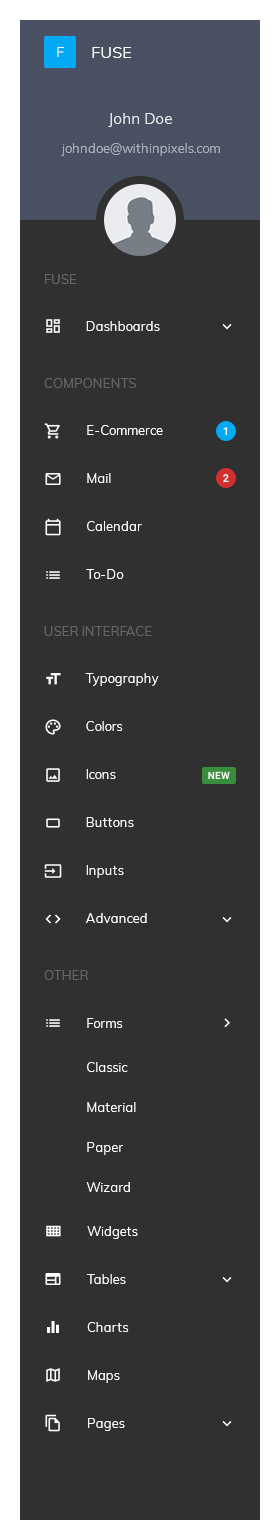
<style>
.page{position:relative;width:280px;height:1540px;background:#303030}
.page>*{position:absolute;margin:0}
.t1{font:14px "Muli-Regular";color:#ffffff}
.t2{font:16px "Muli-Regular";color:#ffffff}
.t3{font:15px "Muli-Regular";color:#ffffff}
.t4{font:13px "Muli-Regular";color:#abafb7}
.t5{font:13px "Muli-Regular";color:#666666;text-transform:uppercase}
.t6{font:13px "Muli-Regular";color:#ffffff}
.t7{font:13px/48px "Muli-Regular";color:#ffffff}
.t8{font:11px "Roboto-Bold";color:#ffffff}
.t9{font:10px "Roboto-Bold";color:#ffffff}
.t10{font:13px/40px "Muli-Regular";color:#ffffff}
</style>
<div class="page">
<p class="t1" style="left:57px;top:47px;width:7px;height:10px">F</p>
<p class="t2" style="left:92px;top:47px;width:39px;height:11px">FUSE</p>
<p class="t3" style="left:108px;top:113px;width:64px;height:15px;opacity:0.87">John Doe</p>
<p class="t4" style="left:61px;top:143px;width:159px;height:13px">johndoe@withinpixels.com</p>
<p class="t5" style="left:45px;top:274px;width:31px;height:10px">Fuse</p>
<p class="t6" style="left:86px;top:321px;width:74px;height:10px">Dashboards</p>
<p class="t5" style="left:44px;top:378px;width:92px;height:10px">Components</p>
<p class="t7" style="left:86px;top:425px;width:77px;height:154px">E-Commerce<br>Mail<br>Calendar<br>To-Do</p>
<p class="t8" style="left:223px;top:427px;width:5px;height:8px">1</p>
<p class="t8" style="left:223px;top:474px;width:6px;height:8px">2</p>
<p class="t5" style="left:44px;top:626px;width:108px;height:10px">User Interface</p>
<p class="t7" style="left:85px;top:673px;width:74px;height:250px">Typography<br>Colors<br>Icons<br>Buttons<br>Inputs<br>Advanced</p>
<p class="t9" style="left:208px;top:771px;width:22px;height:8px">NEW</p>
<p class="t5" style="left:44px;top:970px;width:44px;height:10px">Other</p>
<p class="t6" style="left:87px;top:1018px;width:36px;height:10px">Forms</p>
<p class="t10" style="left:86px;top:1062px;width:50px;height:130px">Classic<br>Material<br>Paper<br>Wizard</p>
<p class="t7" style="left:87px;top:1226px;width:51px;height:205px">Widgets<br>Tables<br>Charts<br>Maps<br>Pages</p>
</div>
